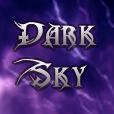
<style>
.page{position:relative;width:114px;height:114px}
.page>*{position:absolute;margin:0}
.t1{font:24.5px "MetalMacabre"}
</style>
<div class="page">
<p class="t1" style="left:14px;top:20px;width:83px;height:31px">Dark</p>
<p class="t1" style="left:13px;top:59px;width:74px;height:32px">Sky</p>
</div>
